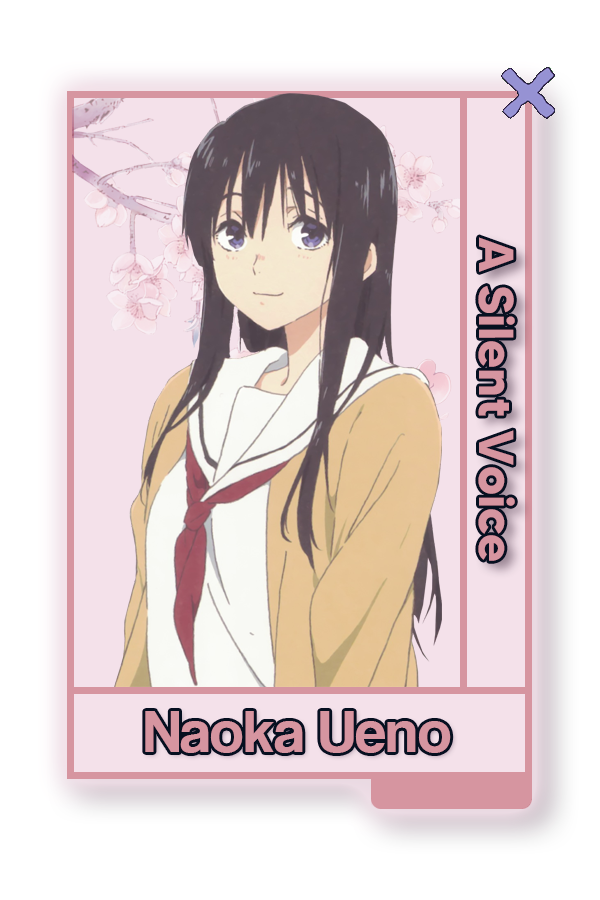
<style>
.page{position:relative;width:600px;height:900px;background:#ffffff}
.page>*{position:absolute;margin:0}
.t1{font:48.8px "MADETOMMY-Bold";color:#d49a9c}
.t2{font:62px "CoolveticaRg-Regular";color:#d49a9c}
</style>
<div class="page">
<p class="t1" style="left:478px;top:237px;width:37px;height:324px;rotate:90deg">A Silent Voice</p>
<p class="t2" style="left:145px;top:711px;width:306px;height:42px">Naoka Ueno</p>
</div>
